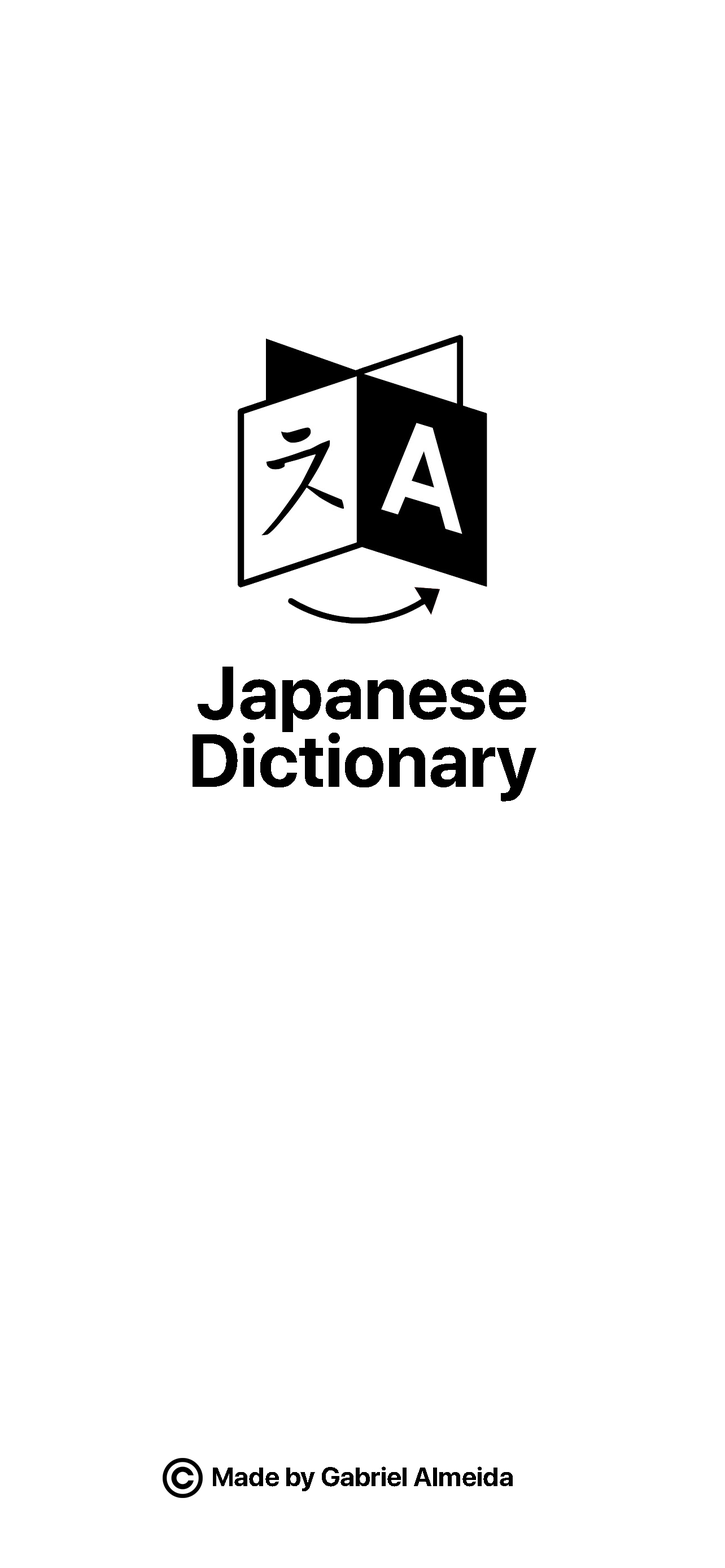
<style>
.page{position:relative;width:725px;height:1568px;background:#ffffff}
.page>*{position:absolute;margin:0}
.t1{font:74.5px "SFProDisplay-Bold";color:#000000}
.t2{font:26.8px "SFProDisplay-Bold";color:#000000}
</style>
<div class="page">
<p class="t1" style="left:192px;top:667px;width:344px;height:134px;text-align:center">Japanese <br>Dictionary</p>
<p class="t2" style="left:213px;top:1466px;width:300px;height:25px">Made by Gabriel Almeida</p>
</div>
